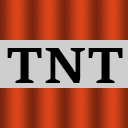
<style>
.page{position:relative;width:128px;height:128px;background:#cecece}
.page>*{position:absolute;margin:0}
.t1{font:53px "SitkaSmall-Bold";color:#000000}
</style>
<div class="page">
<p class="t1" style="left:7px;top:48px;width:116px;height:35px">TNT</p>
</div>
